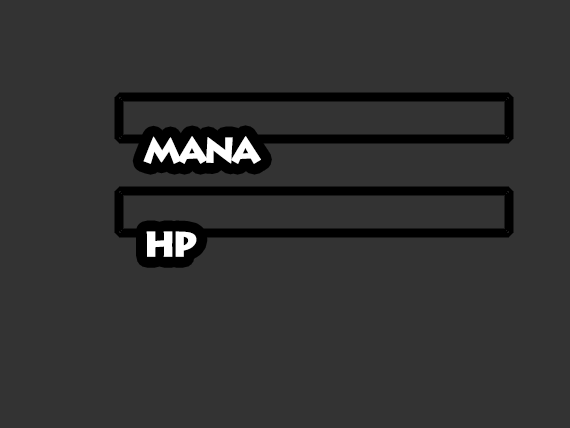
<style>
.page{position:relative;width:570px;height:428px;background:#333333}
.page>*{position:absolute;margin:0}
.t1{font:35px "LithosPro-Black";letter-spacing:-0.105em;color:#ffffff}
</style>
<div class="page">
<p class="t1" style="left:143px;top:136px;width:118px;height:28px">MANA</p>
<p class="t1" style="left:146px;top:231px;width:51px;height:26px">HP</p>
</div>
